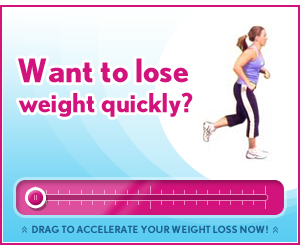
<style>
.page{position:relative;width:300px;height:250px;background:#ffffff}
.page>*{position:absolute;margin:0}
.t1{font:26px/30px "NobelBold";color:#d2137b}
.t2{font:32px/30px "NobelBold";color:#d2137b}
.t3{font:10px "NobelBold";color:#1c6190;text-transform:uppercase}
</style>
<div class="page">
<p class="t1" style="left:18px;top:58px;width:175px;height:59px;text-align:center"><span class="t2">Want to lose <br></span>weight quickly?</p>
<p class="t3" style="left:32px;top:225px;width:236px;height:8px">drag to accelerate your weight loss now!</p>
</div>
